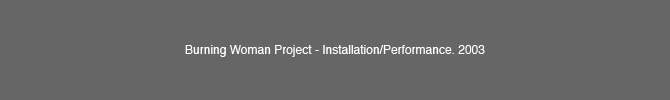
<style>
.page{position:relative;width:670px;height:100px;background:#666666}
.page>*{position:absolute;margin:0}
.t1{font:12px "Helvetica";color:#ffffff}
</style>
<div class="page">
<p class="t1" style="left:185px;top:45px;width:300px;height:12px">Burning Woman Project - Installation/Performance. 2003</p>
</div>
